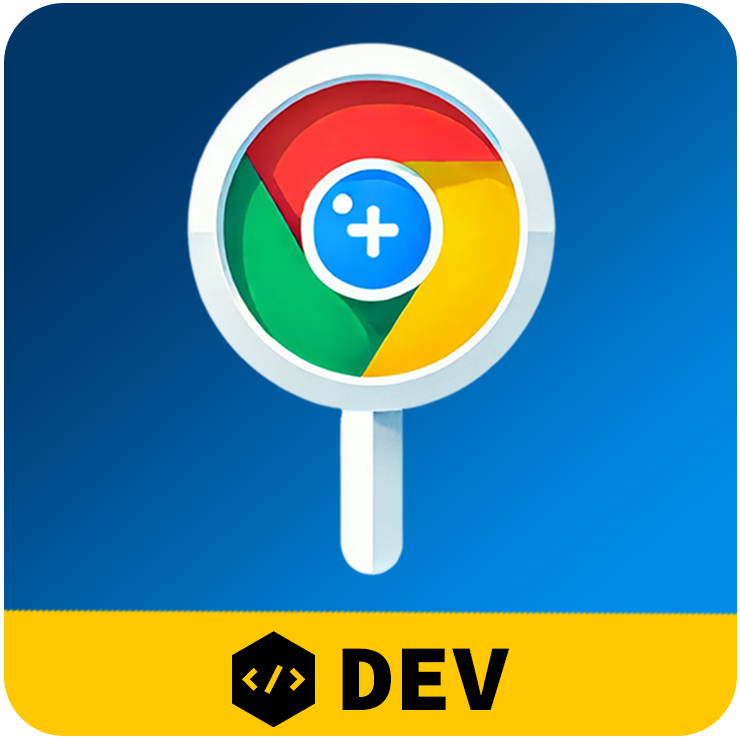
<style>
.page{position:relative;width:740px;height:740px}
.page>*{position:absolute;margin:0}
.t1{font:94.5px "SourceCodeProRoman-Black";color:#000000}
</style>
<div class="page">
<p class="t1" style="left:342px;top:648px;width:168px;height:62px">DEV</p>
</div>
